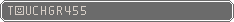
<style>
.page{position:relative;width:234px;height:22px;background:#6b6b6b}
.page>*{position:absolute;margin:0}
.t1{font:10px "NDS12";letter-spacing:0.18em;color:#d6cec6}
</style>
<div class="page">
<p class="t1" style="left:8px;top:6px;width:78px;height:9px">T  UCHGR455</p>
</div>
